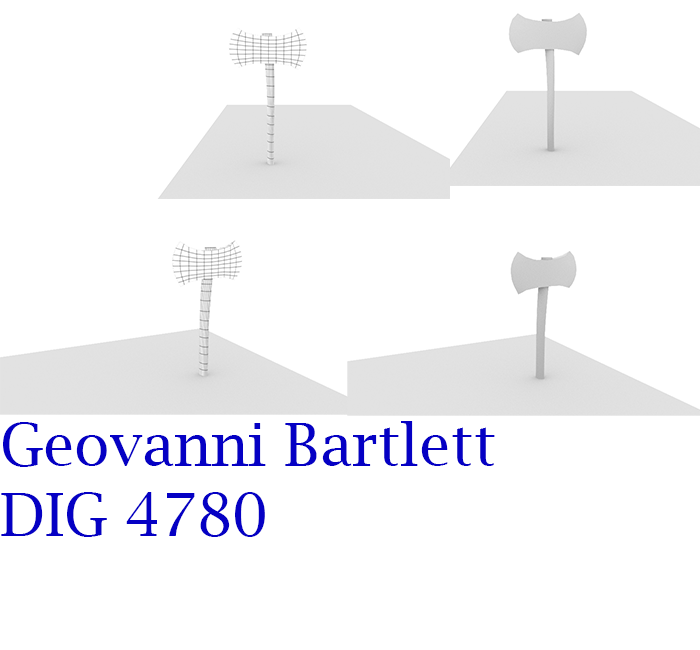
<style>
.page{position:relative;width:700px;height:650px;background:#ffffff}
.page>*{position:absolute;margin:0}
.t1{font:58.8px "LucidaBright";color:#0500c4}
</style>
<div class="page">
<p class="t1" style="left:1px;top:421px;width:494px;height:116px">Geovanni Bartlett<br>DIG 4780</p>
</div>
